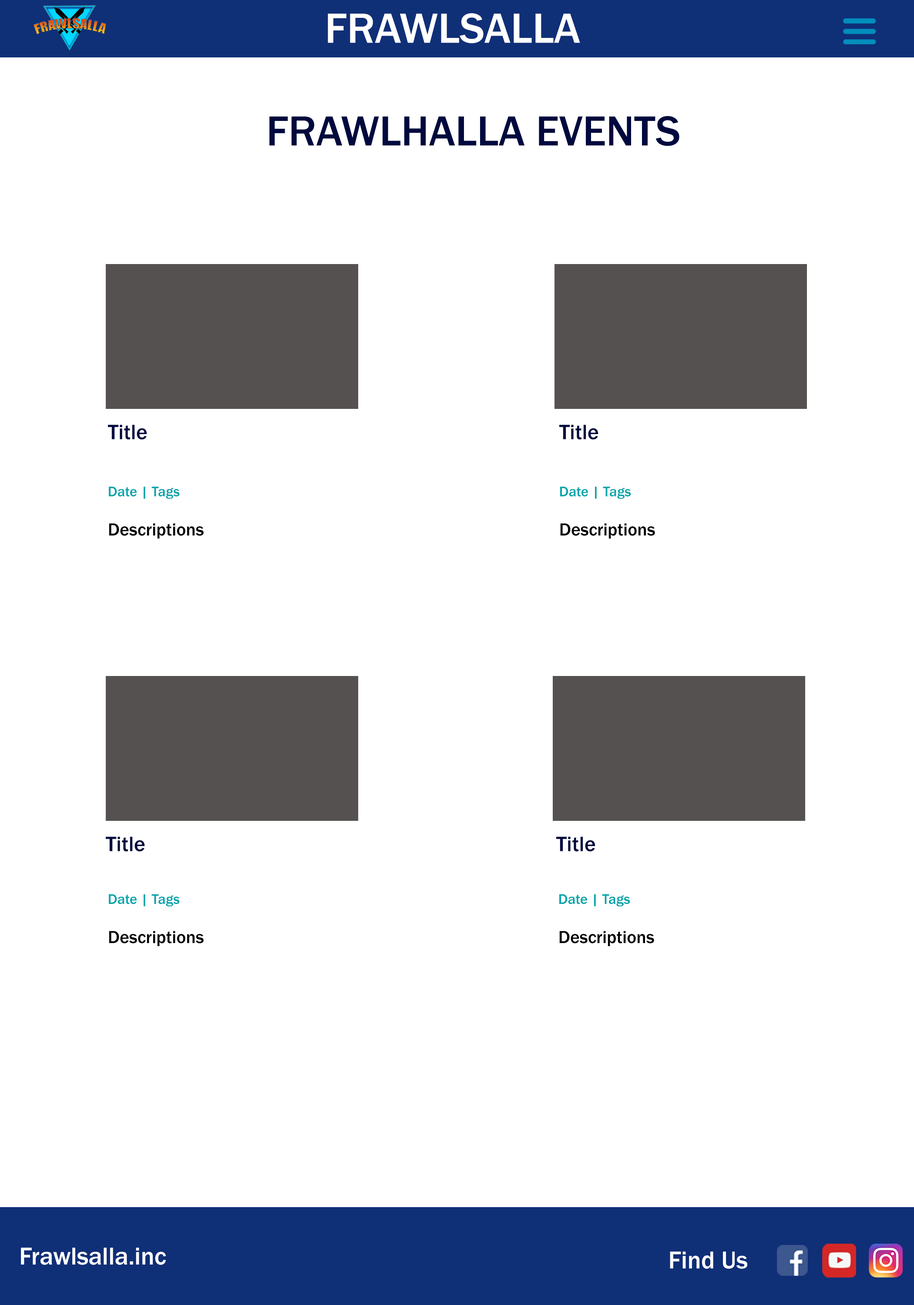
<style>
.page{position:relative;width:914px;height:1305px;background:#ffffff}
.page>*{position:absolute;margin:0}
.t1{font:43.5px "FranklinGothic-Medium";color:#ffffff}
.t2{font:43.5px "FranklinGothic-Medium";color:#00093e}
.t3{font:21.8px "FranklinGothic-Medium";color:#00093e}
.t4{font:18.1px "FranklinGothic-Medium";color:#000000}
.t5{font:14.5px "FranklinGothic-Medium";color:#00a4aa}
.t6{font:25.4px "FranklinGothic-Medium";color:#ffffff}
</style>
<div class="page">
<p class="t1" style="left:328px;top:13px;width:252px;height:31px">FRAWLSALLA</p>
<p class="t2" style="left:269px;top:116px;width:410px;height:30px">FRAWLHALLA EVENTS</p>
<p class="t3" style="left:108px;top:425px;width:39px;height:15px">Title</p>
<p class="t3" style="left:559px;top:425px;width:39px;height:15px">Title</p>
<p class="t4" style="left:109px;top:486px;width:95px;height:53px"><span class="t5">Date | Tags<br><br></span>Descriptions</p>
<p class="t4" style="left:560px;top:486px;width:95px;height:53px"><span class="t5">Date | Tags<br><br></span>Descriptions</p>
<p class="t3" style="left:106px;top:837px;width:39px;height:15px">Title</p>
<p class="t3" style="left:556px;top:837px;width:39px;height:15px">Title</p>
<p class="t4" style="left:109px;top:894px;width:95px;height:52px"><span class="t5">Date | Tags<br><br></span>Descriptions</p>
<p class="t4" style="left:559px;top:894px;width:95px;height:52px"><span class="t5">Date | Tags<br><br></span>Descriptions</p>
<p class="t6" style="left:21px;top:1248px;width:145px;height:17px">Frawlsalla.inc</p>
<p class="t6" style="left:670px;top:1252px;width:77px;height:17px">Find Us</p>
</div>
